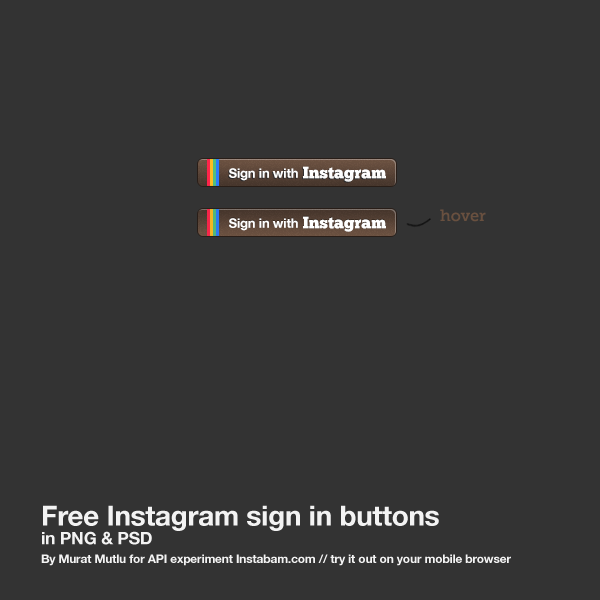
<style>
.page{position:relative;width:600px;height:600px;background:#333333}
.page>*{position:absolute;margin:0}
.t1{font:13px "HelveticaNeueLT-Bold";letter-spacing:-0.015em;color:#ffffff}
.t2{font:16.6px "ChunkFive-Roman";color:#ffffff}
.t3{font:16px "MuseoSlab-500";color:#69503f}
.t4{font:12px/18.8px "HelveticaNeueLT-Bold";letter-spacing:-0.015em;color:#f3f3f3}
.t5{font:27.7px/18.8px "HelveticaNeueLT-Bold";letter-spacing:-0.005em;color:#f3f3f3}
.t6{font:17.3px/18.8px "HelveticaNeueLT-Bold";letter-spacing:-0.015em;color:#f3f3f3}
</style>
<div class="page">
<p class="t1" style="left:229px;top:168px;width:69px;height:13px">Sign in with</p>
<p class="t2" style="left:303px;top:166px;width:83px;height:16px">Instagram</p>
<p class="t3" style="left:440px;top:209px;width:46px;height:13px">hover</p>
<p class="t1" style="left:229px;top:218px;width:69px;height:13px">Sign in with</p>
<p class="t2" style="left:303px;top:216px;width:83px;height:16px">Instagram</p>
<p class="t4" style="left:41px;top:505px;width:470px;height:61px"><span class="t5">Free Instagram sign in buttons<br></span><span class="t6">in PNG &amp; PSD<br></span>By Murat Mutlu for API experiment Instabam.com // try it out on your mobile browser</p>
</div>
